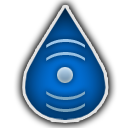
<style>
.page{position:relative;width:128px;height:128px;background:#ffffff}
.page>*{position:absolute;margin:0}
.t1{font:42px "KozGoPro-Regular"}
</style>
<div class="page">
<p class="t1" style="left:46px;top:39px;width:39px;height:73px;rotate:90deg">((   ))</p>
</div>
